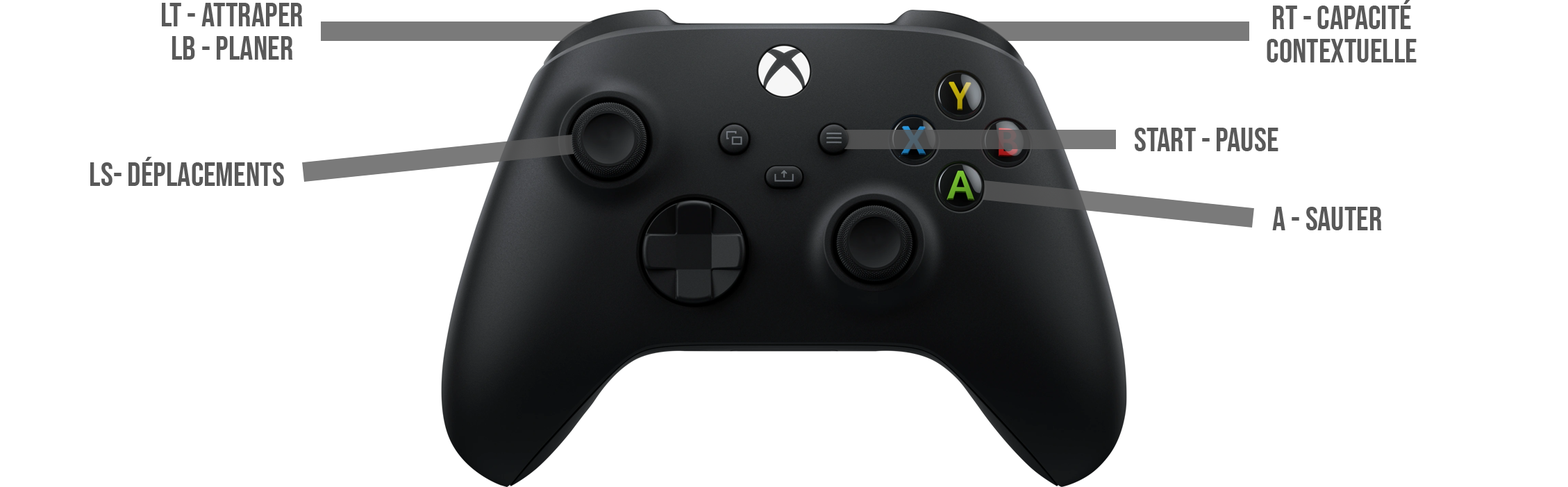
<style>
.page{position:relative;width:1568px;height:487px;background:#ffffff}
.page>*{position:absolute;margin:0}
.t1{font:33.3px "BebasNeue-Regular";color:#595959}
</style>
<div class="page">
<p class="t1" style="left:162px;top:3px;width:141px;height:23px">LT - Attraper</p>
<p class="t1" style="left:1273px;top:0px;width:138px;height:29px">RT - Capacité</p>
<p class="t1" style="left:172px;top:36px;width:121px;height:24px">LB - Planer</p>
<p class="t1" style="left:1267px;top:39px;width:150px;height:23px">Contextuelle</p>
<p class="t1" style="left:1135px;top:128px;width:143px;height:23px">START - Pause</p>
<p class="t1" style="left:90px;top:157px;width:194px;height:29px">LS- Déplacements</p>
<p class="t1" style="left:1272px;top:207px;width:110px;height:24px">A - Sauter</p>
</div>
